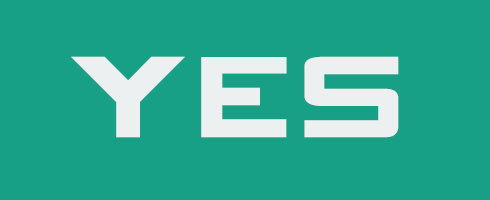
<style>
.page{position:relative;width:490px;height:200px;background:#17a085}
.page>*{position:absolute;margin:0}
.t1{font:100px "GAMECUBENDualSet";color:#ecf0f1}
</style>
<div class="page">
<p class="t1" style="left:71px;top:56px;width:328px;height:82px">YES</p>
</div>
